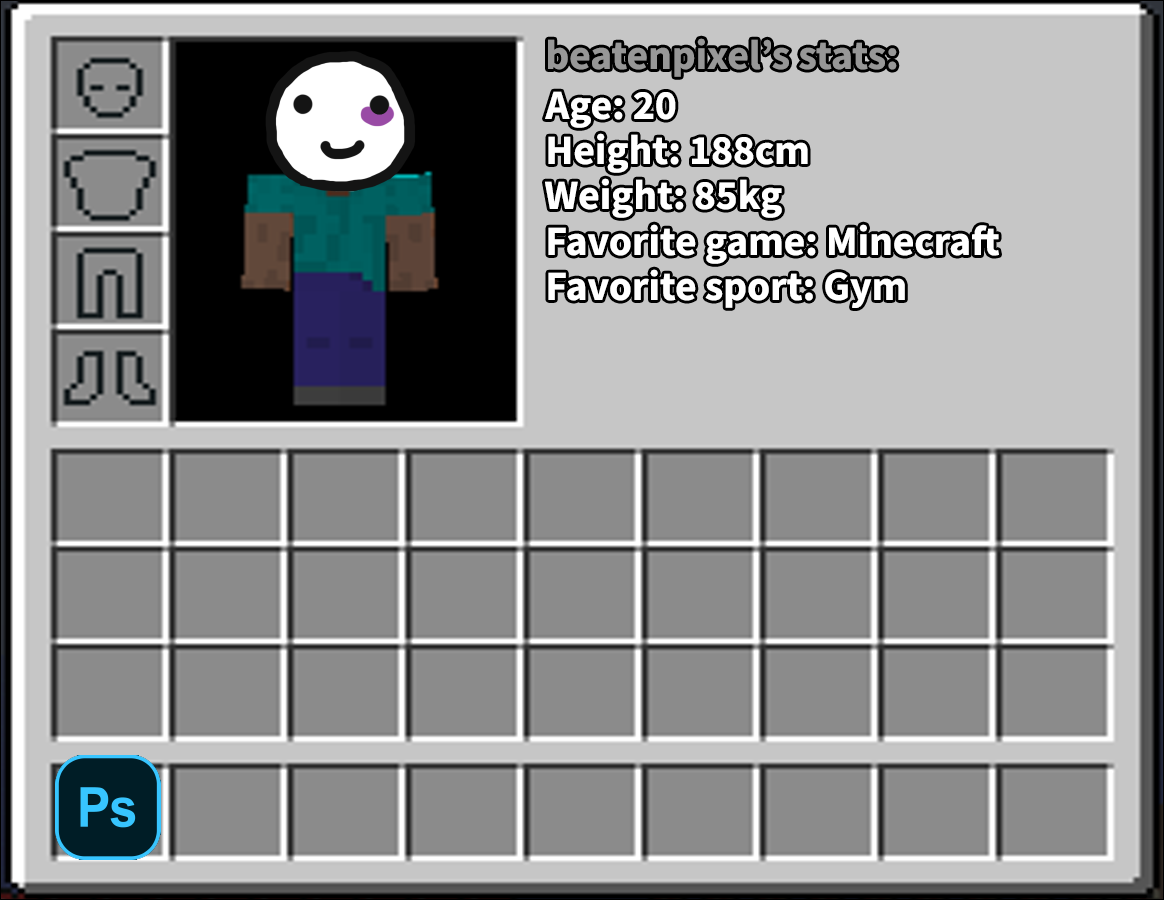
<style>
.page{position:relative;width:1164px;height:900px;background:#8b8b8b}
.page>*{position:absolute;margin:0}
.t1{font:41.5px "SourceSansPro-Bold";color:#ffffff}
</style>
<div class="page">
<p class="t1" style="left:545px;top:91px;width:131px;height:37px">Age: 20</p>
<p class="t1" style="left:548px;top:133px;width:260px;height:40px">Height: 188cm</p>
<p class="t1" style="left:545px;top:178px;width:237px;height:40px">Weight: 85kg</p>
<p class="t1" style="left:548px;top:224px;width:451px;height:40px">Favorite game: Minecraft</p>
<p class="t1" style="left:548px;top:269px;width:357px;height:39px">Favorite sport: Gym</p>
</div>
